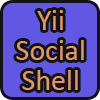
<style>
.page{position:relative;width:100px;height:100px;background:#6157e2}
.page>*{position:absolute;margin:0}
.t1{font:30px/30px "Calibri";color:#e19766}
</style>
<div class="page">
<p class="t1" style="left:16px;top:10px;width:68px;height:80px;text-align:center">Yii<br>Social<br>Shell</p>
</div>
